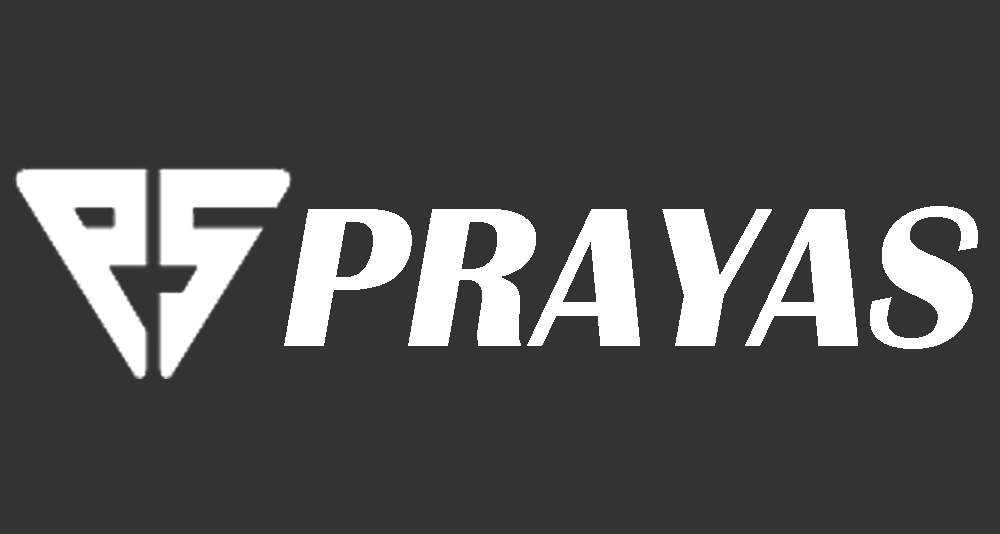
<style>
.page{position:relative;width:1000px;height:534px;background:#333333}
.page>*{position:absolute;margin:0}
.t1{font:206px "BritannicBold";letter-spacing:0.005em;color:#ffffff;text-transform:uppercase;font-style:italic}
</style>
<div class="page">
<p class="t1" style="left:284px;top:206px;width:694px;height:143px">Prayas<br>s</p>
</div>
